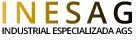
<style>
.page{position:relative;width:138px;height:40px;background:#ffffff}
.page>*{position:absolute;margin:0}
.t1{font:30.6px "OpenSans-Semibold";letter-spacing:-0.05em}
.t2{font:9.1px "OpenSans-Semibold";letter-spacing:-0.05em;color:#000000}
</style>
<div class="page">
<p class="t1" style="left:2px;top:1px;width:130px;height:23px">I N E S A G</p>
<p class="t2" style="left:2px;top:27px;width:130px;height:7px">INDUSTRIAL ESPECIALIZADA AGS</p>
</div>
